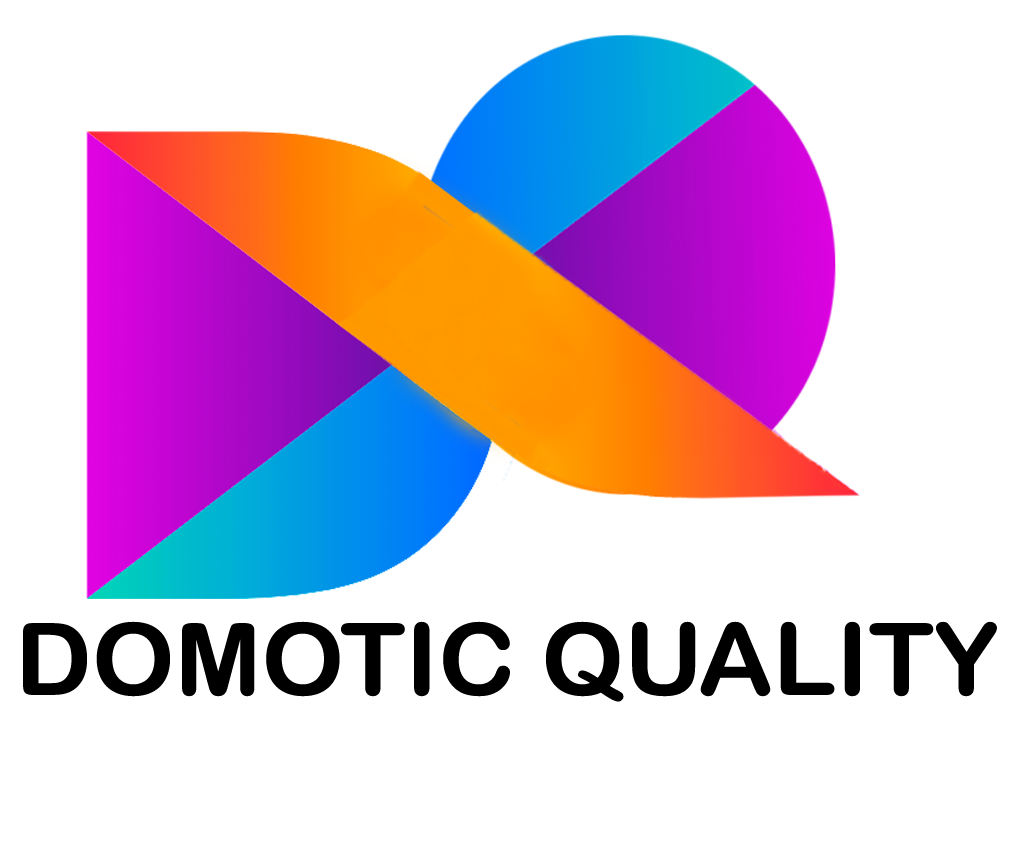
<style>
.page{position:relative;width:1027px;height:843px;background:#ffffff}
.page>*{position:absolute;margin:0}
.t1{font:100px "ArialRoundedMTBold";color:#000000;scale:1.04 1}
</style>
<div class="page">
<p class="t1" style="left:23px;top:621px;width:974px;height:81px">DOMOTIC QUALITY</p>
</div>
